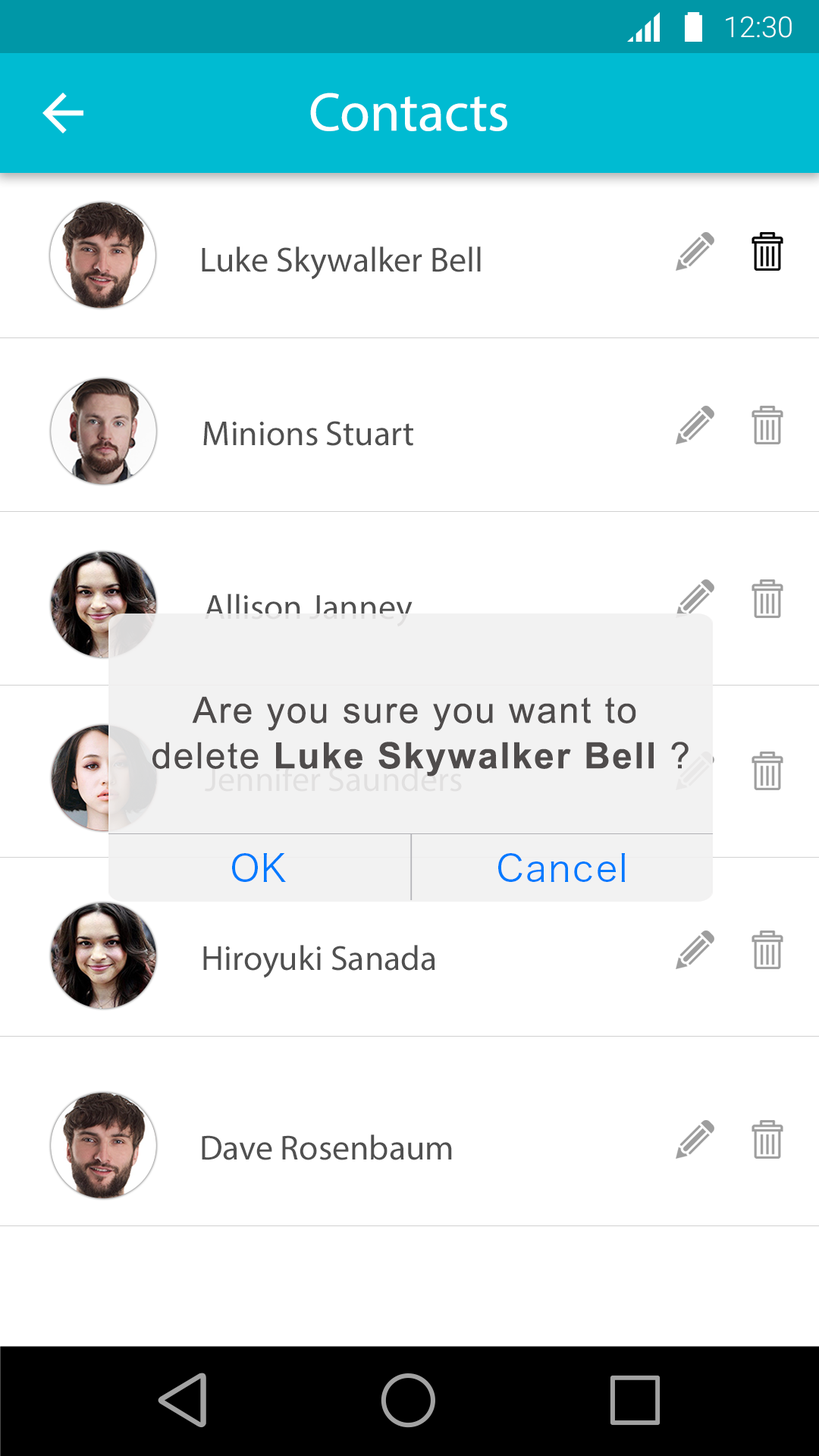
<style>
.page{position:relative;width:819px;height:1456px;background:#ffffff}
.page>*{position:absolute;margin:0}
.t1{font:28.8px "Roboto-Light";color:#ffffff}
.t2{font:54.6px "MyriadPro-Regular";color:#ffffff}
.t3{font:34.9px "MyriadPro-Regular";color:#505050}
.t4{font:36.4px/45.5px "ArialMT";letter-spacing:0.05em;color:#4f4c4c}
.t5{font:36.4px/45.5px "Arial-BoldMT";letter-spacing:0.05em;color:#4f4c4c}
.t6{font:36.4px "HiraKakuProN-W3";letter-spacing:0.05em;color:#007aff}
</style>
<div class="page">
<p class="t1" style="left:726px;top:16px;width:66px;height:22px">12:30</p>
<p class="t2" style="left:310px;top:93px;width:197px;height:38px">Contacts</p>
<p class="t3" style="left:202px;top:246px;width:279px;height:34px">Luke Skywalker Bell</p>
<p class="t3" style="left:203px;top:421px;width:210px;height:25px">Minions Stuart</p>
<p class="t3" style="left:205px;top:594px;width:208px;height:33px">Allison Janney</p>
<p class="t4" style="left:152px;top:696px;width:537px;height:81px;text-align:center">Are you sure you want to <br>delete <span class="t5">Luke Skywalker Bell</span> ?</p>
<p class="t6" style="left:232px;top:853px;width:54px;height:29px">OK</p>
<p class="t6" style="left:498px;top:853px;width:127px;height:29px">Cancel</p>
<p class="t3" style="left:203px;top:945px;width:232px;height:33px">Hiroyuki Sanada</p>
<p class="t3" style="left:202px;top:1134px;width:250px;height:26px">Dave Rosenbaum</p>
</div>
